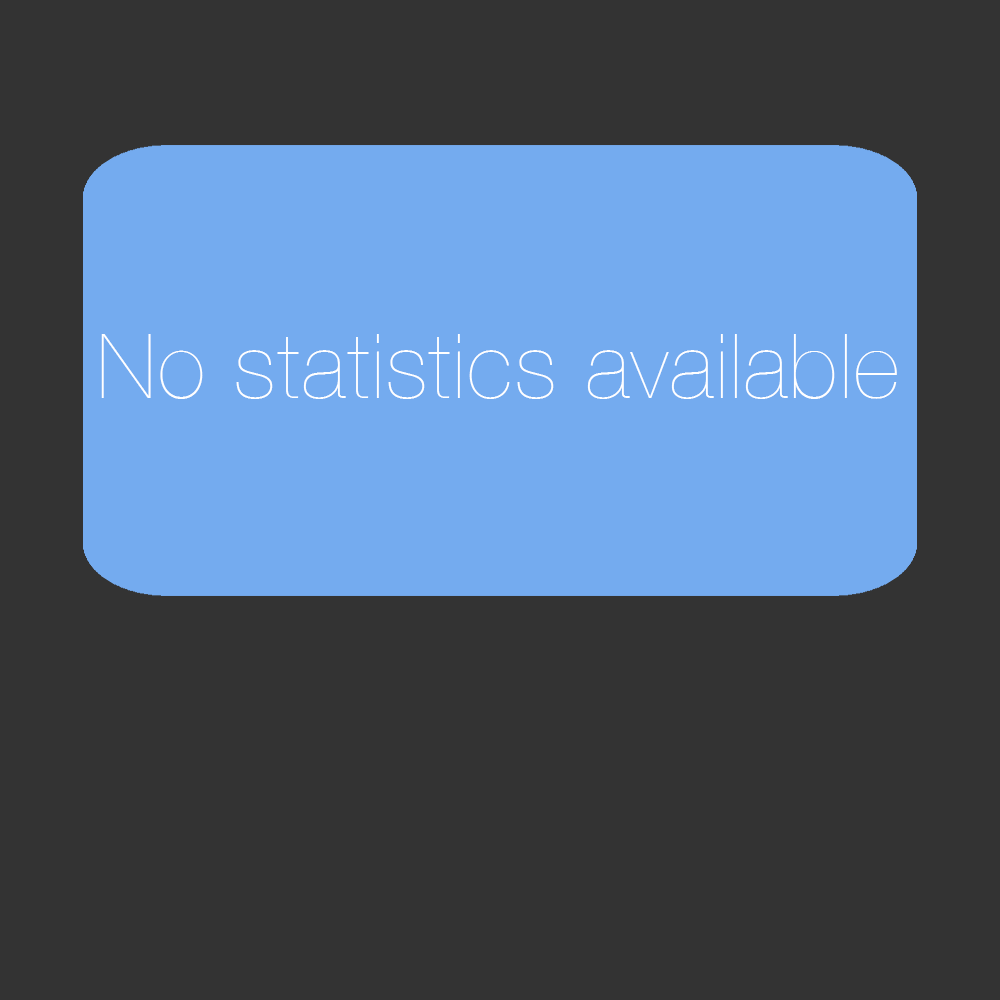
<style>
.page{position:relative;width:1000px;height:1000px;background:#333333}
.page>*{position:absolute;margin:0}
.t1{font:90px "HelveticaNeue-UltraLight";letter-spacing:0.025em;color:#ffffff}
</style>
<div class="page">
<p class="t1" style="left:101px;top:334px;width:796px;height:65px">No statistics available</p>
</div>
